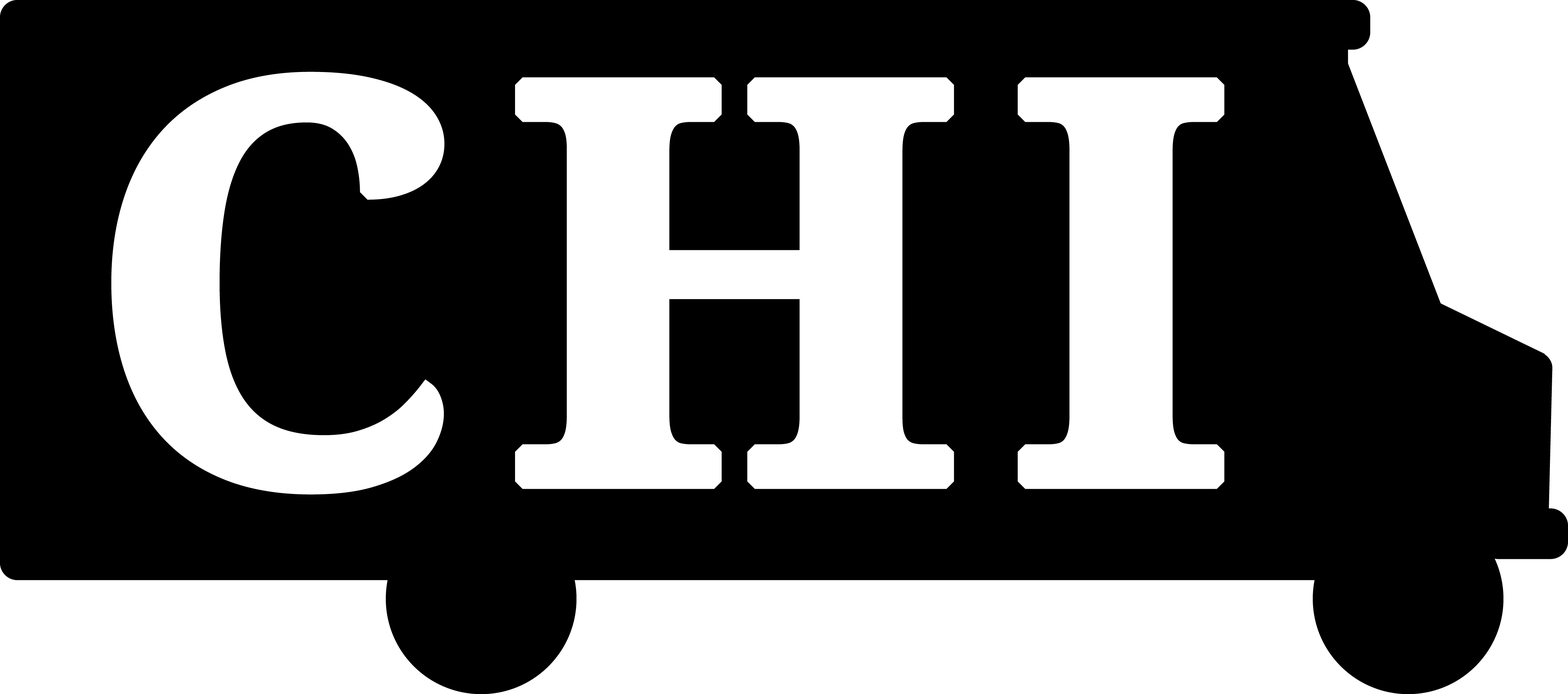
<style>
.page{position:relative;width:1568px;height:694px;background:#000000}
.page>*{position:absolute;margin:0}
.t1{font:554.9px "DroidSerif-Bold";letter-spacing:0.06em;color:#ffffff;font-weight:bold}
</style>
<div class="page">
<p class="t1" style="left:111px;top:72px;width:1114px;height:422px">CHI</p>
</div>
